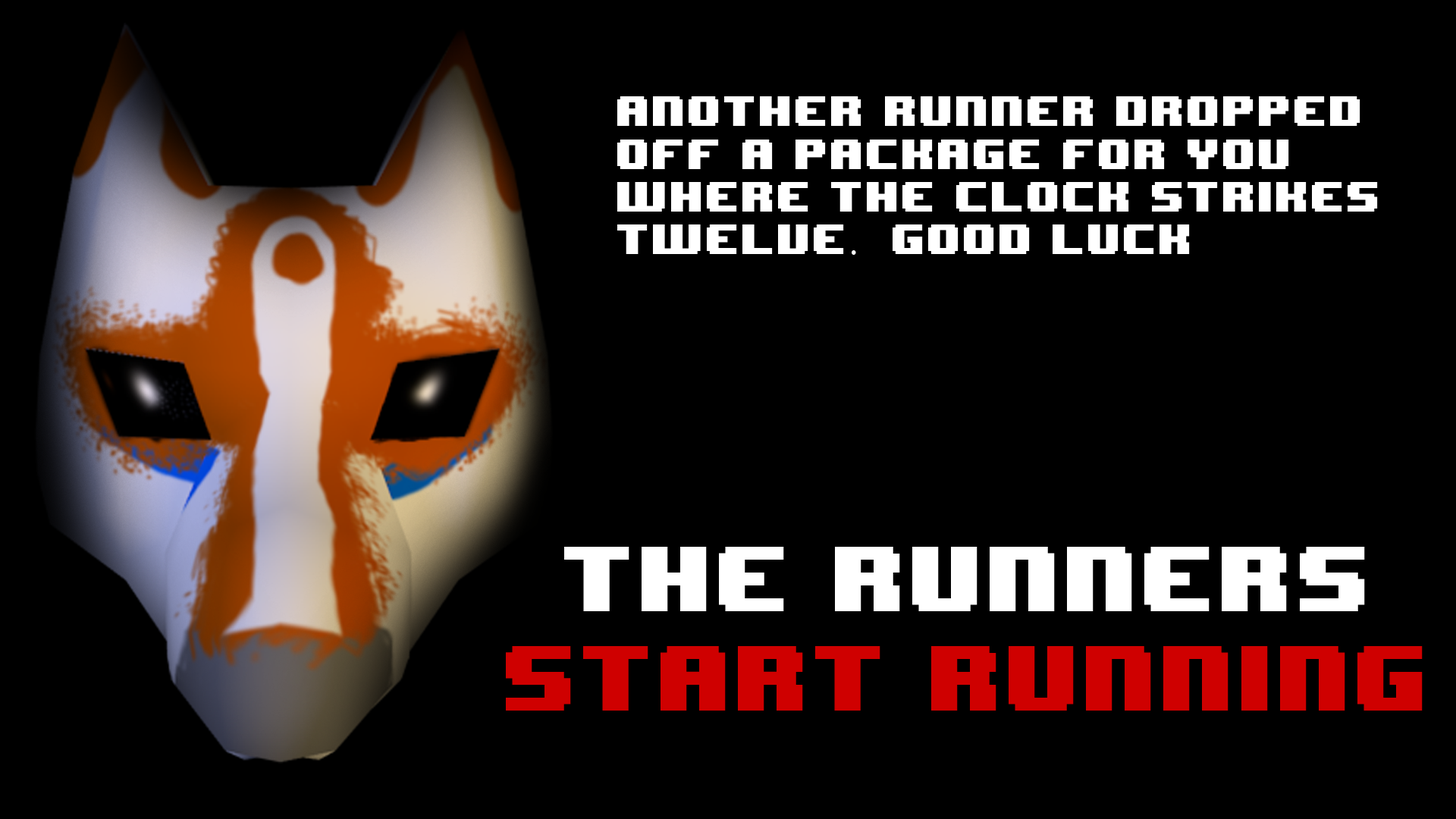
<style>
.page{position:relative;width:1456px;height:819px;background:#000000}
.page>*{position:absolute;margin:0}
.t1{font:35.6px "8BITWONDERNominal";color:#ffffff}
.t2{font:35.6px "KozGoPr6N-Regular";color:#ffffff}
.t3{font:77.4px "8BITWONDERNominal";color:#ffffff}
.t4{font:77.4px "8BITWONDERNominal";color:#cf0000}
</style>
<div class="page">
<p class="t1" style="left:617px;top:96px;width:761px;height:159px">Another Runner dropped <br>off a package for you <br>where the clock strikes <br>twelve<span class="t2">.</span>  Good luck</p>
<p class="t3" style="left:564px;top:547px;width:801px;height:64px">The Runners</p>
<p class="t4" style="left:506px;top:646px;width:917px;height:65px">Start Running</p>
</div>
